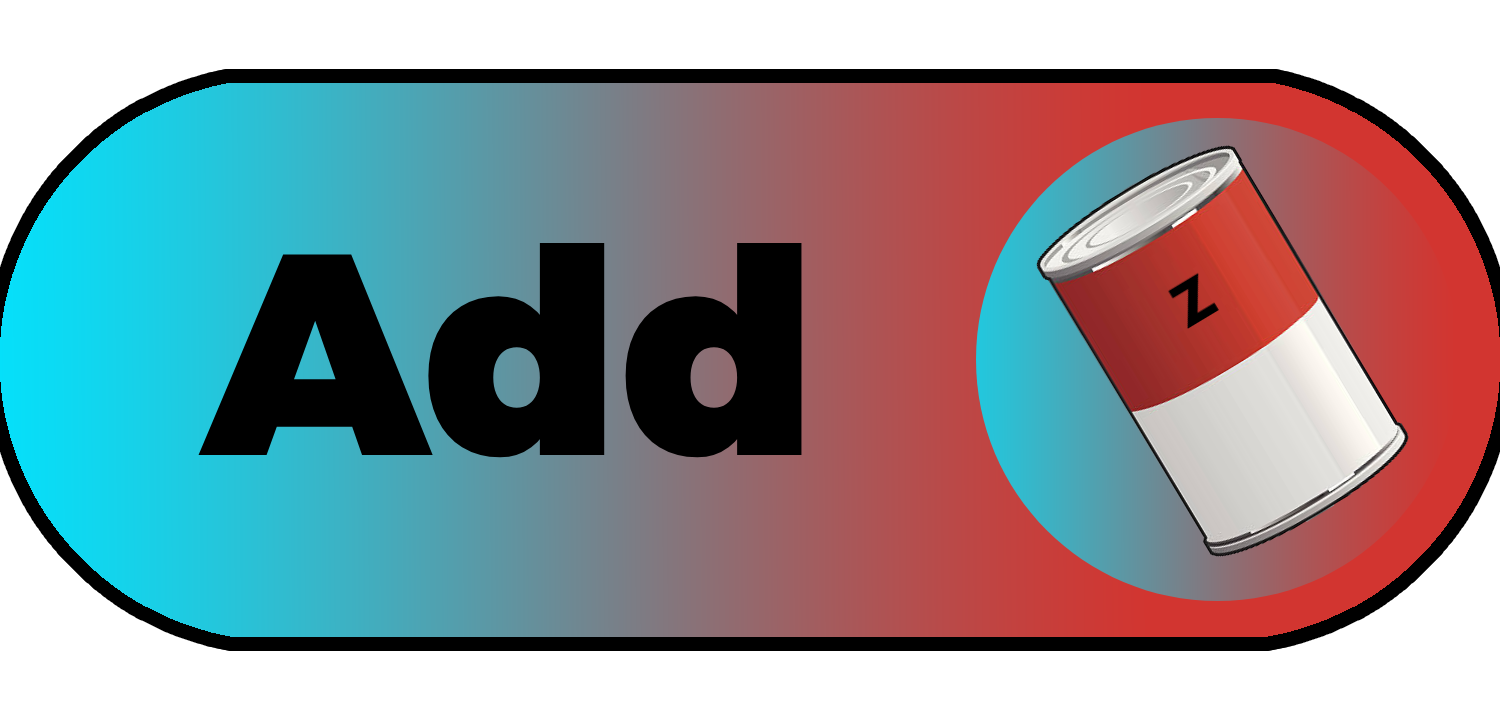
<style>
.page{position:relative;width:1500px;height:720px;background:#ffffff}
.page>*{position:absolute;margin:0}
.t1{font:285.9px "Alexandria-Black";color:#000000}
</style>
<div class="page">
<p class="t1" style="left:198px;top:242px;width:604px;height:216px">Add</p>
</div>
